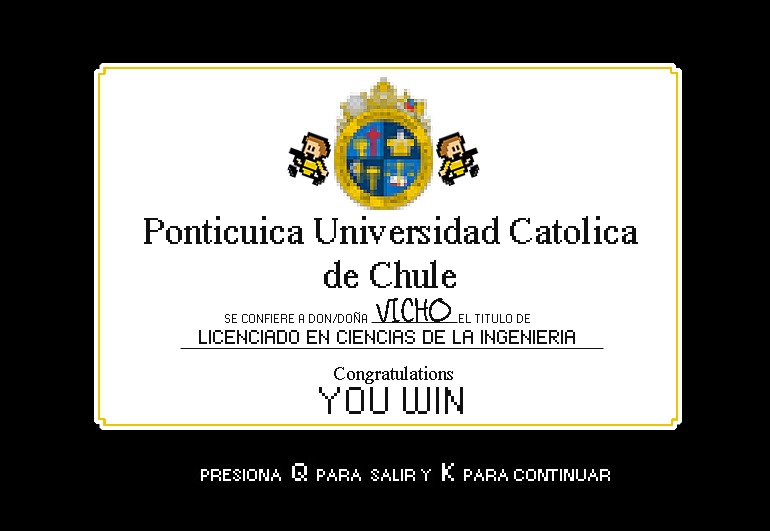
<style>
.page{position:relative;width:770px;height:531px;background:#ffffff}
.page>*{position:absolute;margin:0}
.t1{font:36px "MS Serif";color:#101010}
.t2{font:30px "LightuptheWorld";color:#101010;text-transform:uppercase}
.t3{font:14px "HaxrCorp S12";color:#101010;text-transform:uppercase}
.t4{font:30px "HaxrCorp S8";color:#101010;text-transform:uppercase}
.t5{font:18px "MS Serif";color:#101010}
.t6{font:36px "HaxrCorp S12";color:#101010;text-transform:uppercase}
</style>
<div class="page">
<p class="t1" style="left:144px;top:216px;width:494px;height:72px;text-align:center">Ponticuica Universidad Catolica de Chule</p>
<p class="t2" style="left:376px;top:298px;width:75px;height:25px">vicho</p>
<p class="t3" style="left:225px;top:312px;width:305px;height:11px">Se confiere a don/doña                              el titulo de</p>
<p class="t4" style="left:199px;top:330px;width:376px;height:14px">Licenciado en ciencias de la ingenieria</p>
<p class="t5" style="left:334px;top:366px;width:119px;height:18px">Congratulations</p>
<p class="t6" style="left:319px;top:387px;width:144px;height:27px">You win</p>
</div>
